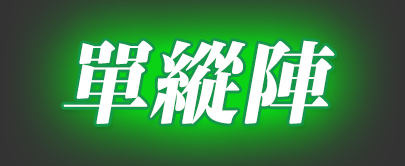
<style>
.page{position:relative;width:405px;height:166px}
.page>*{position:absolute;margin:0}
.t1{font:89px "KochoStd-Heavy";letter-spacing:0.005em;color:#ffffff;font-weight:bold;font-style:italic}
</style>
<div class="page">
<p class="t1" style="left:63px;top:40px;width:272px;height:84px">單縱陣</p>
</div>
